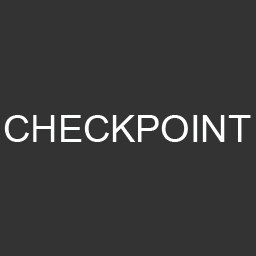
<style>
.page{position:relative;width:256px;height:256px;background:#333333}
.page>*{position:absolute;margin:0}
.t1{font:38px "ArialMT";color:#feffff}
</style>
<div class="page">
<p class="t1" style="left:4px;top:115px;width:247px;height:27px">CHECKPOINT</p>
</div>
